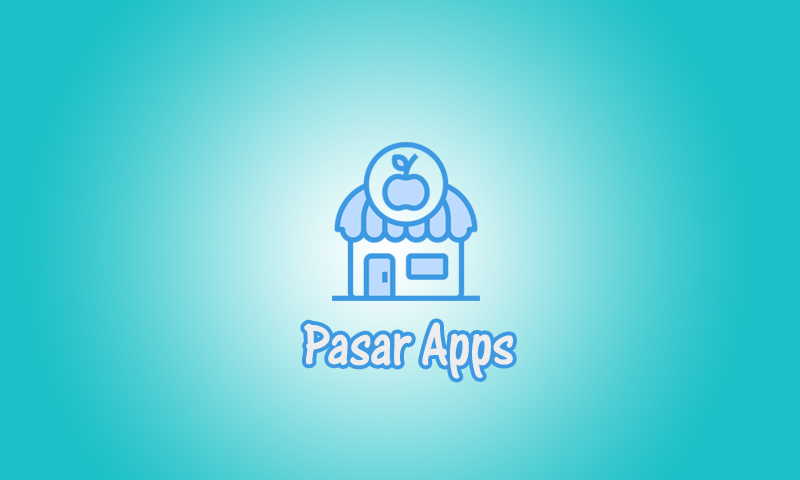
<style>
.page{position:relative;width:800px;height:480px}
.page>*{position:absolute;margin:0}
.t1{font:60px "OneStrokeScriptLetPlain";color:#ededed}
</style>
<div class="page">
<p class="t1" style="left:304px;top:322px;width:209px;height:57px">Pasar Apps</p>
</div>
